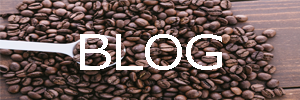
<style>
.page{position:relative;width:300px;height:100px}
.page>*{position:absolute;margin:0}
.t1{font:48px "Meiryo";color:#ffffff;scale:1.18 1}
</style>
<div class="page">
<p class="t1" style="left:80px;top:34px;width:142px;height:36px">BLOG</p>
</div>
